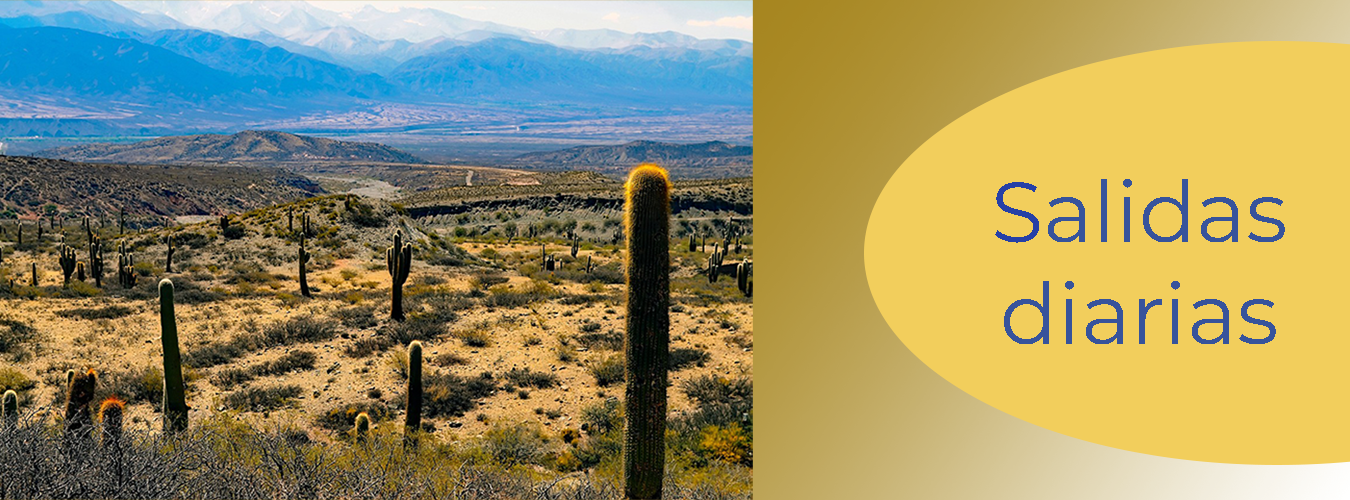
<style>
.page{position:relative;width:1350px;height:500px;background:#f2ce5c}
.page>*{position:absolute;margin:0}
.t1{font:85px "Montserrat-Regular";color:#37539b}
.t2{font:85px "Montserrat-Regular";color:#2640a6}
</style>
<div class="page">
<p class="t1" style="left:995px;top:179px;width:290px;height:165px;text-align:center"><span class="t2">S</span>alidas<br>diarias</p>
</div>
